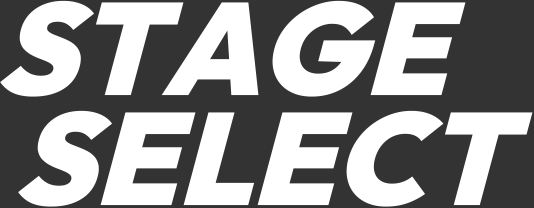
<style>
.page{position:relative;width:534px;height:208px;background:#333333}
.page>*{position:absolute;margin:0}
.t1{font:134.6px/113.9px "Outfit-Black";color:#ffffff;font-style:italic;scale:0.97 1}
</style>
<div class="page">
<p class="t1" style="left:0px;top:0px;width:533px;height:207px">STAGE<br>  SELECT</p>
</div>
